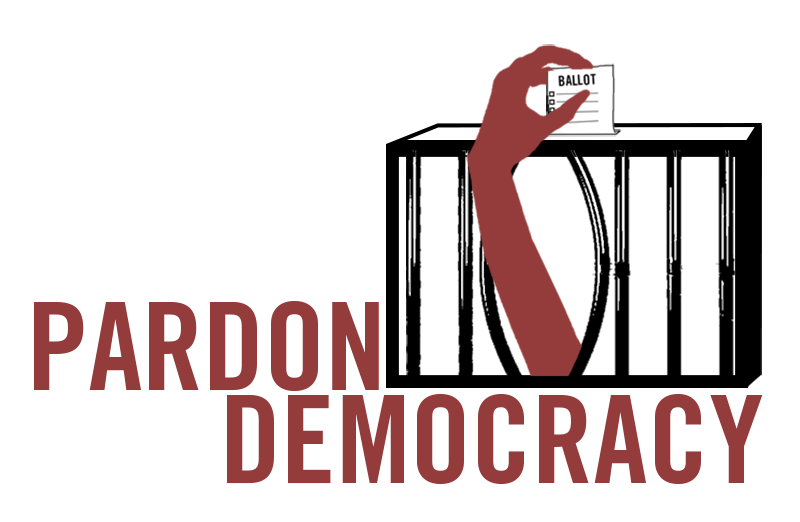
<style>
.page{position:relative;width:800px;height:522px;background:#ffffff}
.page>*{position:absolute;margin:0}
.t1{font:122.1px/93.2px "TradeGothic-BoldCondTwenty";color:#943b3b}
</style>
<div class="page">
<p class="t1" style="left:34px;top:301px;width:729px;height:184px;text-align:center">PARDON <br>DEMOCRACY</p>
</div>
